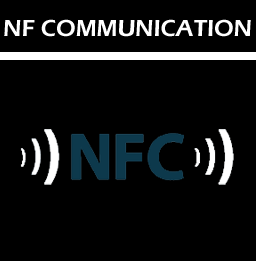
<style>
.page{position:relative;width:256px;height:261px;background:#000000}
.page>*{position:absolute;margin:0}
.t1{font:24px "ErasITC-Demi";color:#ffffff;text-transform:uppercase}
</style>
<div class="page">
<p class="t1" style="left:4px;top:19px;width:247px;height:18px">NF communication</p>
</div>
